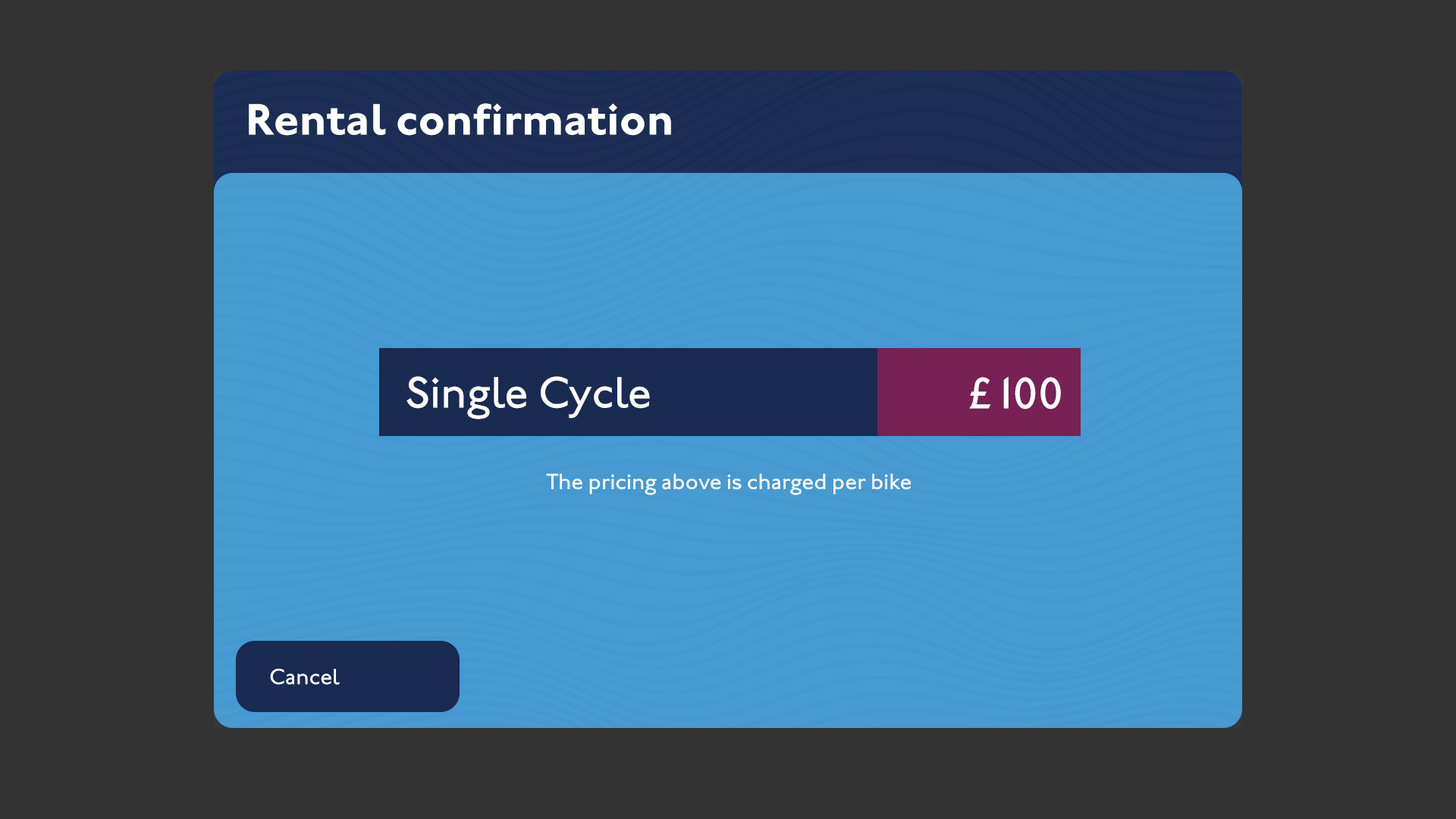
<style>
.page{position:relative;width:1456px;height:819px;background:#333333}
.page>*{position:absolute;margin:0}
.t1{font:45.5px "JohnstonITCStd-Bold";color:#ffffff}
.t2{font:45.5px "JohnstonITCStd-Medium";color:#ffffff}
.t3{font:22.7px "JohnstonITCStd-Medium";color:#ffffff}
</style>
<div class="page">
<p class="t1" style="left:249px;top:103px;width:422px;height:33px">Rental confirmation</p>
<p class="t2" style="left:406px;top:376px;width:244px;height:43px">Single Cycle</p>
<p class="t2" style="left:969px;top:376px;width:92px;height:33px">£100</p>
<p class="t3" style="left:546px;top:473px;width:365px;height:22px">The pricing above is charged per bike</p>
<p class="t3" style="left:270px;top:668px;width:70px;height:17px">Cancel</p>
</div>
